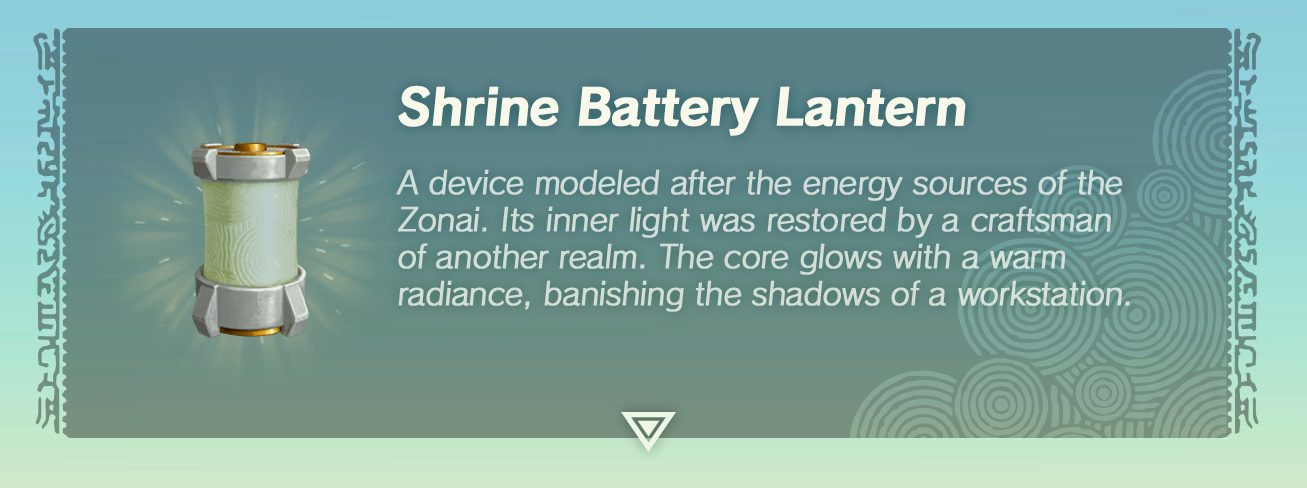
<style>
.page{position:relative;width:1307px;height:488px}
.page>*{position:absolute;margin:0}
.t1{font:49px "Calamity-Bold";letter-spacing:-0.03em;color:#f8f9eb;font-weight:bold}
.t2{font:31px "Calamity-Regular";letter-spacing:-0.03em;color:#d2ddd8;font-weight:bold}
</style>
<div class="page">
<p class="t1" style="left:398px;top:85px;width:568px;height:51px">Shrine Battery Lantern</p>
<p class="t2" style="left:396px;top:169px;width:734px;height:143px">A device modeled after the energy sources of the Zonai. Its inner light was restored by a craftsman of another realm. The core glows with a warm radiance, banishing the shadows of a workstation.</p>
</div>
